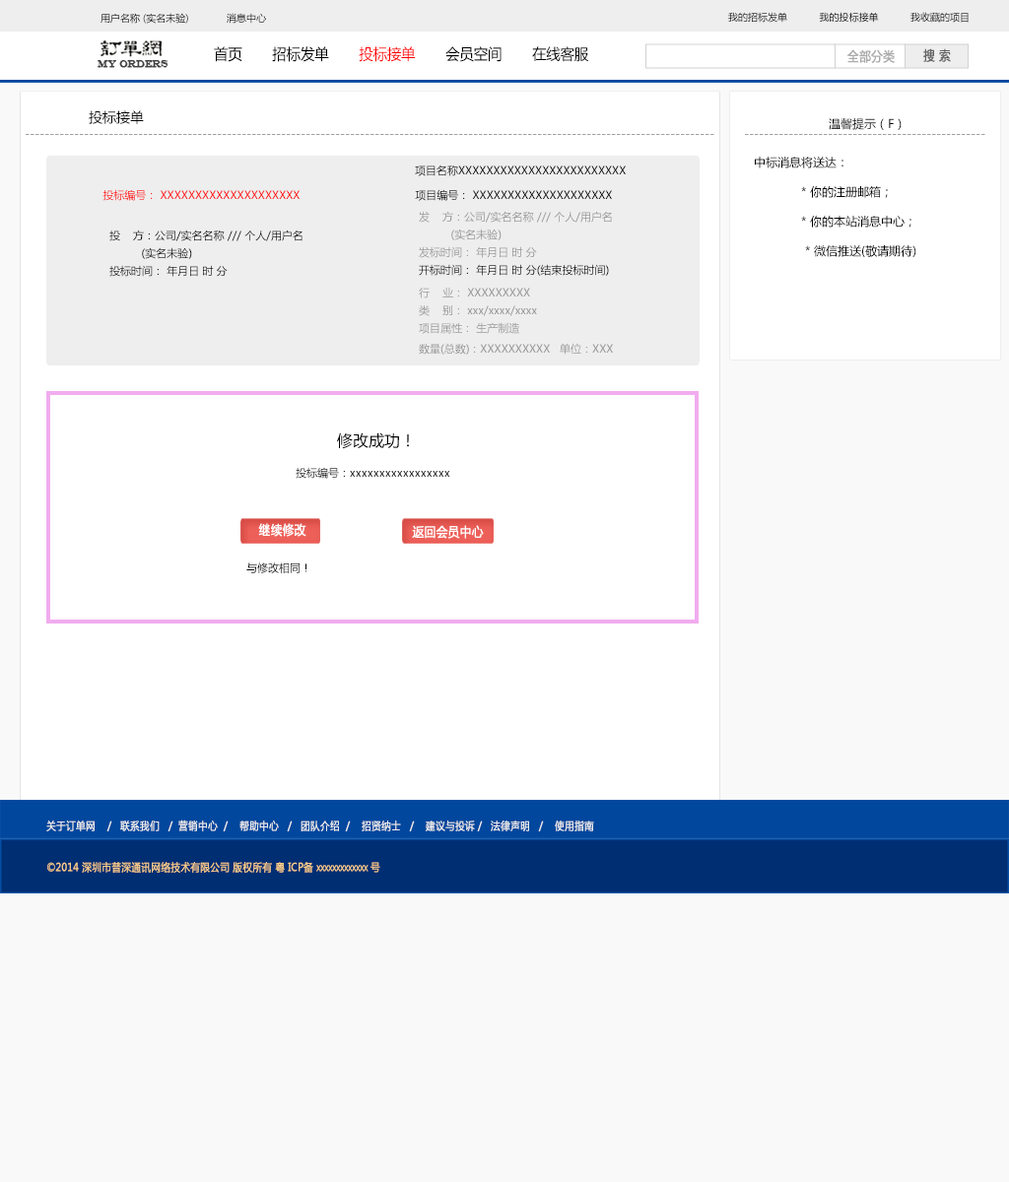
<style>
.page{position:relative;width:1009px;height:1182px;background:#ffffff}
.page>*{position:absolute;margin:0}
.t1{font:9.9px "MicrosoftYaHei";color:#000000}
.t2{font:15.2px "MicrosoftYaHei";color:#000000;font-variant:small-caps;scale:0.94 1}
.t3{font:15.2px "MicrosoftYaHei";color:#ff0000;font-variant:small-caps;scale:0.94 1}
.t4{font:13px "MicrosoftYaHei";color:#aaaaaa;font-variant:small-caps;font-weight:bold;scale:0.86 1}
.t5{font:13px "MicrosoftYaHei";color:#626262;font-variant:small-caps;font-weight:bold;scale:0.86 1}
.t6{font:9.8px "EngraversMT";color:#434343;font-variant:small-caps;font-weight:bold;scale:0.86 1}
.t7{font:13.8px "MicrosoftYaHei";color:#000000}
.t8{font:11.8px "MicrosoftYaHei";color:#000000}
.t9{font:11.8px "MicrosoftYaHei";color:#a0a0a0}
.t10{font:11.8px/29.6px "MicrosoftYaHei";color:#000000}
.t11{font:10.8px "MicrosoftYaHei";color:#000000}
.t12{font:10.8px "MicrosoftYaHei";color:#ff0000}
.t13{font:10.8px/17.7px "MicrosoftYaHei";color:#959595}
.t14{font:10.8px/17.7px "MicrosoftYaHei";color:#000000}
.t15{font:10.8px "MicrosoftYaHei";color:#959595}
.t16{font:15.8px "MicrosoftYaHei";color:#000000}
.t17{font:10.8px "MicrosoftYaHei"}
.t18{font:13px "MicrosoftYaHei";color:#ffffff;font-variant:small-caps;font-weight:bold;scale:0.86 1}
.t19{font:10.8px "MicrosoftYaHei";color:#eeeeee;font-variant:small-caps;font-weight:bold;scale:0.86 1}
.t20{font:15.2px "STXihei";color:#eeeeee;font-variant:small-caps;font-weight:bold;scale:0.86 1}
.t21{font:10.8px "MicrosoftYaHei";color:#facd89;font-variant:small-caps;font-weight:bold;scale:0.87 1}
.t22{font:10.8px "MicrosoftYaHei";color:#eeeeee;font-variant:small-caps;font-weight:bold;scale:0.87 1}
</style>
<div class="page">
<p class="t1" style="left:100px;top:13px;width:166px;height:11px">用户名称 (实名未验)             消息中心</p>
<p class="t1" style="left:728px;top:12px;width:240px;height:11px">我的招标发单           我的投标接单           我收藏的项目</p>
<p class="t2" style="left:214px;top:46px;width:375px;height:16px">首页       招标发单      <span class="t3"> 投标接单</span>       会员空间       在线客服</p>
<p class="t4" style="left:847px;top:49px;width:47px;height:14px">全部分类</p>
<p class="t5" style="left:923px;top:48px;width:28px;height:14px">搜 索</p>
<p class="t6" style="left:98px;top:60px;width:70px;height:8px">MY ORDERS</p>
<p class="t7" style="left:89px;top:110px;width:55px;height:14px">投标接单</p>
<p class="t8" style="left:828px;top:118px;width:73px;height:12px">温馨提示（F）</p>
<p class="t9" style="left:26px;top:134px;width:688px;height:1px">--------------------------------------------------------------------------------------------------------------------------------------------</p>
<p class="t9" style="left:745px;top:134px;width:240px;height:1px">-------------------------------------------------</p>
<p class="t10" style="left:755px;top:157px;width:161px;height:100px">中标消息将送达：<br>            * 你的注册邮箱；<br>            * 你的本站消息中心；<br>             * 微信推送(敬请期待)</p>
<p class="t11" style="left:415px;top:165px;width:211px;height:11px">项目名称XXXXXXXXXXXXXXXXXXXXXXXX</p>
<p class="t12" style="left:102px;top:189px;width:197px;height:12px">投标编号： XXXXXXXXXXXXXXXXXXXX</p>
<p class="t11" style="left:415px;top:189px;width:197px;height:12px">项目编号： XXXXXXXXXXXXXXXXXXXX</p>
<p class="t13" style="left:419px;top:211px;width:193px;height:65px">发    方：公司/实名名称 /// 个人/用户名<br>          (实名未验)<br>发标时间： 年月日 时 分          <br><span class="t14">开标时间： 年月日 时 分(结束投标时间)</span></p>
<p class="t14" style="left:109px;top:230px;width:193px;height:47px">投    方：公司/实名名称 /// 个人/用户名<br>          (实名未验)<br>投标时间： 年月日 时 分</p>
<p class="t13" style="left:419px;top:288px;width:118px;height:46px">行    业： XXXXXXXXX<br>类    别： xxx/xxxx/xxxx<br>项目属性： 生产制造</p>
<p class="t15" style="left:419px;top:343px;width:194px;height:12px">数量(总数)：XXXXXXXXXX   单位：XXX</p>
<p class="t16" style="left:337px;top:432px;width:72px;height:17px">修改成功！</p>
<p class="t17" style="left:296px;top:467px;width:154px;height:12px">投标编号：xxxxxxxxxxxxxxxxx</p>
<p class="t18" style="left:258px;top:523px;width:48px;height:14px">继续修改</p>
<p class="t18" style="left:412px;top:525px;width:72px;height:14px">返回会员中心</p>
<p class="t11" style="left:246px;top:562px;width:61px;height:11px">与修改相同！</p>
<p class="t19" style="left:46px;top:820px;width:548px;height:11px"><span class="t20"><br><br></span>关于订单网    /   联系我们   /  营销中心  /    帮助中心   /   团队介绍  /    招贤纳士   /    建议与投诉 /   法律声明   /    使用指南</p>
<p class="t21" style="left:47px;top:862px;width:333px;height:11px"><span class="t22"> </span>©2014 深圳市普深通讯网络技术有限公司 版权所有 粤 ICP备 xxxxxxxxxxxxx 号</p>
</div>
